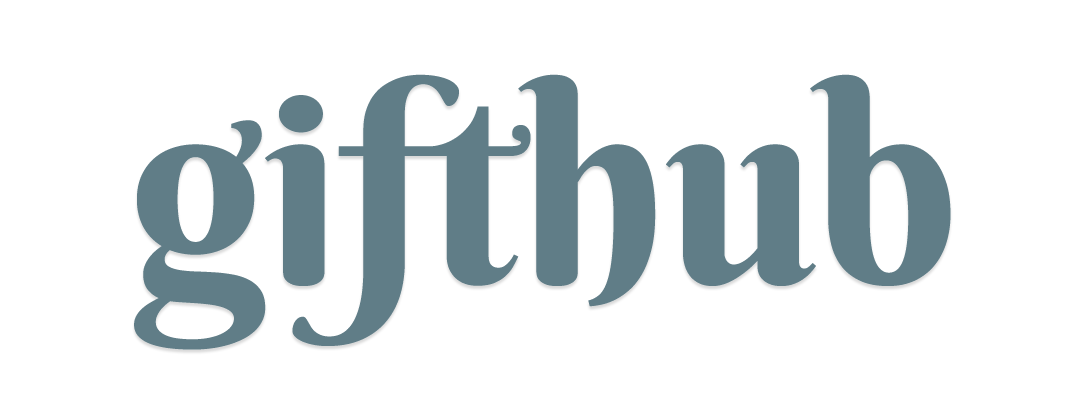
<style>
.page{position:relative;width:1085px;height:394px;background:#ffffff}
.page>*{position:absolute;margin:0}
.t1{font:275px "BerkshireSwash-Regular";letter-spacing:-0.005em;color:#607d87}
</style>
<div class="page">
<p class="t1" style="left:134px;top:74px;width:817px;height:276px">gifthub</p>
</div>
